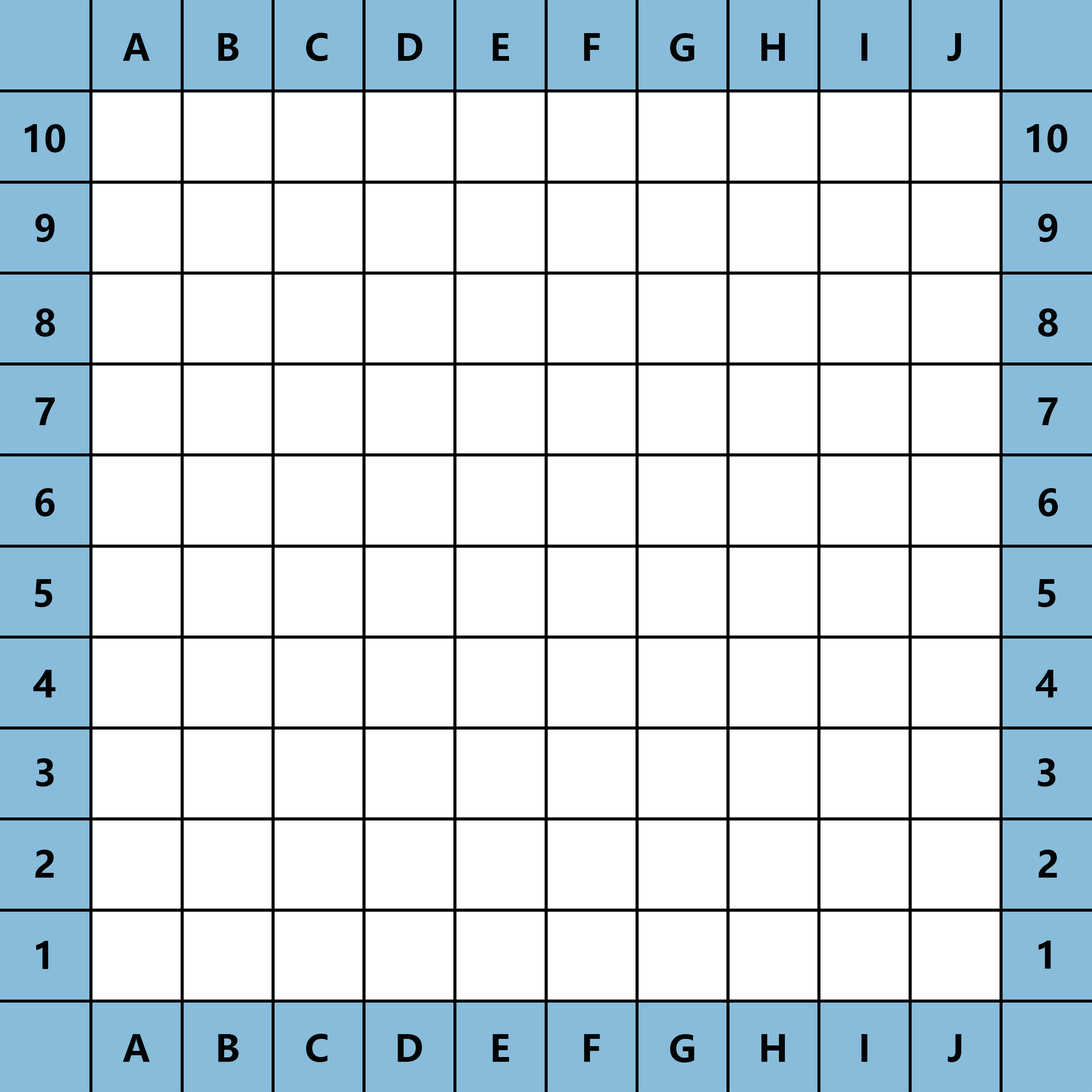
<style>
.page{position:relative;width:1092px;height:1092px;background:#ffffff}
.page>*{position:absolute;margin:0}
.t1{font:36.4px "MicrosoftYaHei-Bold";color:#000203}
</style>
<div class="page">
<p class="t1" style="left:123px;top:33px;width:27px;height:28px">A</p>
<p class="t1" style="left:218px;top:33px;width:21px;height:28px">B</p>
<p class="t1" style="left:306px;top:33px;width:22px;height:28px">C</p>
<p class="t1" style="left:398px;top:33px;width:25px;height:28px">D</p>
<p class="t1" style="left:492px;top:33px;width:17px;height:28px">E</p>
<p class="t1" style="left:584px;top:33px;width:16px;height:28px">F</p>
<p class="t1" style="left:670px;top:33px;width:25px;height:29px">G</p>
<p class="t1" style="left:761px;top:33px;width:24px;height:28px">H</p>
<p class="t1" style="left:861px;top:33px;width:6px;height:28px">I</p>
<p class="t1" style="left:947px;top:33px;width:14px;height:28px">J</p>
<p class="t1" style="left:25px;top:124px;width:40px;height:29px">10</p>
<p class="t1" style="left:1027px;top:124px;width:40px;height:29px">10</p>
<p class="t1" style="left:35px;top:214px;width:20px;height:28px">9</p>
<p class="t1" style="left:1038px;top:214px;width:19px;height:28px">9</p>
<p class="t1" style="left:35px;top:308px;width:20px;height:29px">8</p>
<p class="t1" style="left:1038px;top:308px;width:20px;height:29px">8</p>
<p class="t1" style="left:35px;top:397px;width:20px;height:28px">7</p>
<p class="t1" style="left:1038px;top:397px;width:20px;height:28px">7</p>
<p class="t1" style="left:35px;top:488px;width:20px;height:29px">6</p>
<p class="t1" style="left:1038px;top:488px;width:20px;height:29px">6</p>
<p class="t1" style="left:35px;top:579px;width:17px;height:28px">5</p>
<p class="t1" style="left:1038px;top:579px;width:18px;height:28px">5</p>
<p class="t1" style="left:33px;top:670px;width:22px;height:27px">4</p>
<p class="t1" style="left:34px;top:670px;width:22px;height:27px">4</p>
<p class="t1" style="left:1036px;top:670px;width:21px;height:27px">4</p>
<p class="t1" style="left:36px;top:758px;width:18px;height:29px">3</p>
<p class="t1" style="left:1038px;top:758px;width:18px;height:29px">3</p>
<p class="t1" style="left:35px;top:850px;width:19px;height:28px">2</p>
<p class="t1" style="left:1038px;top:850px;width:19px;height:28px">2</p>
<p class="t1" style="left:36px;top:941px;width:12px;height:28px">1</p>
<p class="t1" style="left:1038px;top:941px;width:13px;height:28px">1</p>
<p class="t1" style="left:123px;top:1034px;width:27px;height:28px">A</p>
<p class="t1" style="left:218px;top:1034px;width:21px;height:28px">B</p>
<p class="t1" style="left:306px;top:1034px;width:22px;height:28px">C</p>
<p class="t1" style="left:397px;top:1034px;width:25px;height:28px">D</p>
<p class="t1" style="left:492px;top:1034px;width:17px;height:28px">E</p>
<p class="t1" style="left:584px;top:1034px;width:16px;height:28px">F</p>
<p class="t1" style="left:670px;top:1034px;width:25px;height:29px">G</p>
<p class="t1" style="left:761px;top:1034px;width:24px;height:28px">H</p>
<p class="t1" style="left:861px;top:1034px;width:6px;height:28px">I</p>
<p class="t1" style="left:947px;top:1034px;width:14px;height:28px">J</p>
</div>
